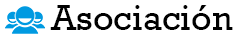
<style>
.page{position:relative;width:240px;height:40px;background:#ffffff}
.page>*{position:absolute;margin:0}
.t1{font:36px "Rockwell";color:#000000}
</style>
<div class="page">
<p class="t1" style="left:50px;top:5px;width:183px;height:25px">Asociación</p>
</div>
